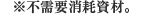
<style>
.page{position:relative;width:143px;height:14px;background:#ffffff}
.page>*{position:absolute;margin:0}
.t1{font:14px "RyuminPr6N-Bold";color:#2e2e2e}
</style>
<div class="page">
<p class="t1" style="left:14px;top:0px;width:115px;height:14px">※不需要消耗資材。</p>
</div>
